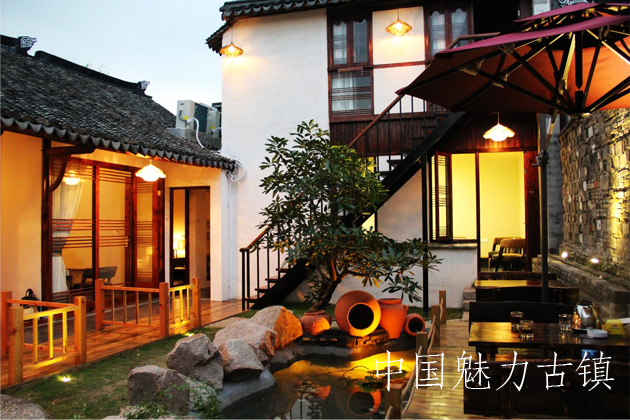
<style>
.page{position:relative;width:630px;height:420px}
.page>*{position:absolute;margin:0}
.t1{font:43.6px "STFangsong";letter-spacing:-0.05em;color:#ffffff}
</style>
<div class="page">
<p class="t1" style="left:375px;top:350px;width:240px;height:42px">中国魅力古镇</p>
</div>
